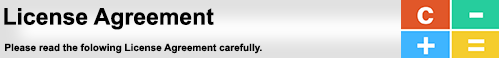
<style>
.page{position:relative;width:499px;height:58px}
.page>*{position:absolute;margin:0}
.t1{font:10px "Arial-BoldMT";color:#000000}
.t2{font:3px "Arial-BoldMT";color:#000000}
.t3{font:23px "Arial-BoldMT";color:#000000}
.t4{font:12px "ArialMT";color:#000000}
</style>
<div class="page">
<p class="t1" style="left:4px;top:8px;width:258px;height:46px"><span class="t2"> </span><span class="t3">License Agreement <br></span><span class="t4"><br></span> Please read the folowing License Agreement carefully.</p>
</div>
